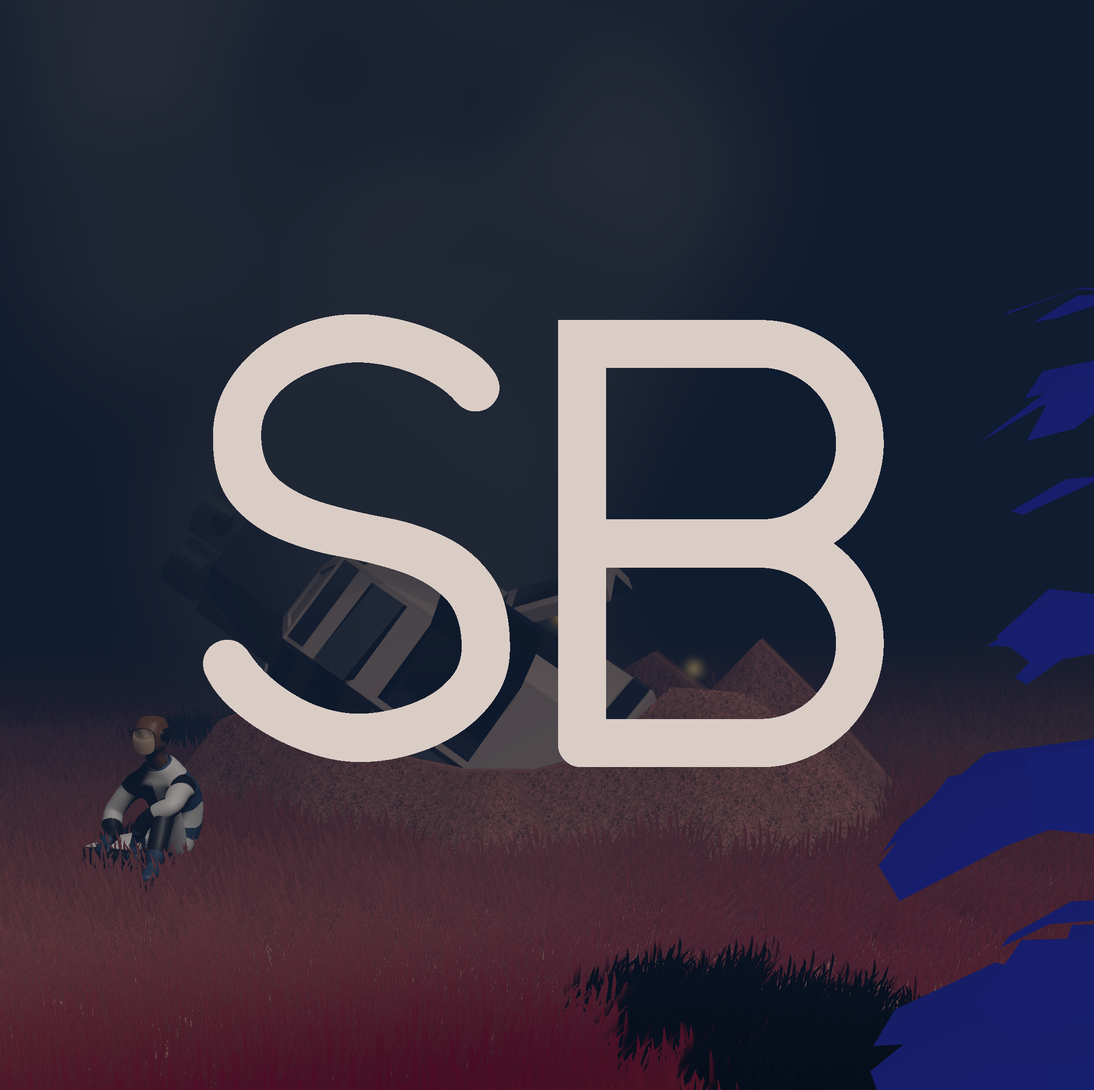
<style>
.page{position:relative;width:1094px;height:1090px}
.page>*{position:absolute;margin:0}
.t1{font:654.3px "Amazonas";color:#dacdc6}
</style>
<div class="page">
<p class="t1" style="left:203px;top:315px;width:680px;height:452px">SB</p>
</div>
